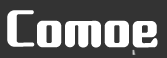
<style>
.page{position:relative;width:167px;height:58px;background:#333333}
.page>*{position:absolute;margin:0}
.t1{font:48px "MF-SuBai(Noncommercial)-Regular";color:#ffffff}
</style>
<div class="page">
<p class="t1" style="left:7px;top:10px;width:151px;height:38px">Comoe</p>
</div>
